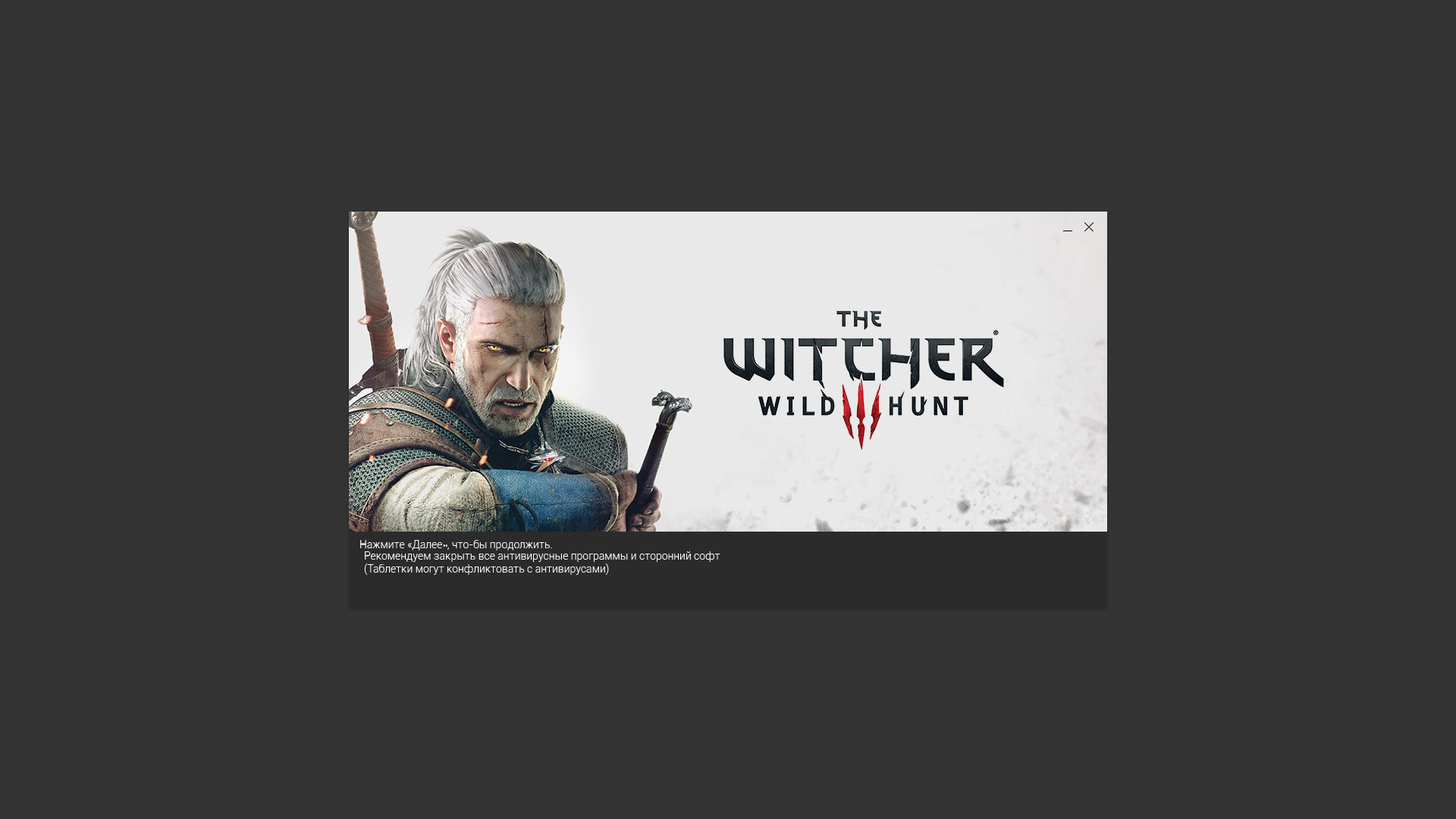
<style>
.page{position:relative;width:1456px;height:819px;background:#333333}
.page>*{position:absolute;margin:0}
.t1{font:10.6px "Roboto-Light";color:#ffffff}
</style>
<div class="page">
<p class="t1" style="left:360px;top:540px;width:192px;height:11px">Нажмите «Далее», что-бы продолжить.</p>
<p class="t1" style="left:364px;top:551px;width:356px;height:24px">Рекомендуем закрыть все антивирусные программы и сторонний софт <br>(Таблетки могут конфликтовать с антивирусами)</p>
</div>
